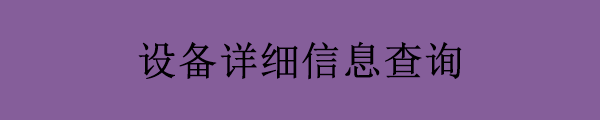
<style>
.page{position:relative;width:600px;height:120px;background:#855e9a}
.page>*{position:absolute;margin:0}
.t1{font:40px "SimSun";color:#000000;font-weight:bold}
</style>
<div class="page">
<p class="t1" style="left:138px;top:41px;width:324px;height:39px">设备详细信息查询</p>
</div>
